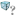
<style>
.page{position:relative;width:16px;height:15px;background:#ffffff}
.page>*{position:absolute;margin:0}
.t1{font:14px "BodoniBT-Bold";letter-spacing:-0.025em;color:#8e8e8e}
</style>
<div class="page">
<p class="t1" style="left:10px;top:5px;width:6px;height:10px">?</p>
</div>
